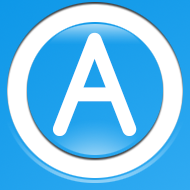
<style>
.page{position:relative;width:190px;height:190px;background:#ffffff}
.page>*{position:absolute;margin:0}
.t1{font:132px "Comfortaa-Bold";color:#ffffff}
</style>
<div class="page">
<p class="t1" style="left:52px;top:32px;width:85px;height:104px">A</p>
</div>
